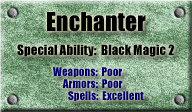
<style>
.page{position:relative;width:192px;height:112px}
.page>*{position:absolute;margin:0}
.t1{font:24px "Impact";color:#000000}
.t2{font:13px "Impact";color:#000000}
.t3{font:11px "Impact";color:#00006d}
</style>
<div class="page">
<p class="t1" style="left:47px;top:12px;width:99px;height:20px">Enchanter</p>
<p class="t2" style="left:17px;top:44px;width:157px;height:13px">Special Ability:  Black Magic 2</p>
<p class="t3" style="left:53px;top:67px;width:69px;height:10px">Weapons:  Poor</p>
<p class="t3" style="left:62px;top:79px;width:61px;height:9px">Armors:  Poor</p>
<p class="t3" style="left:68px;top:91px;width:76px;height:10px">Spells:  Excellent</p>
</div>
